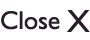
<style>
.page{position:relative;width:90px;height:40px;background:#ffffff}
.page>*{position:absolute;margin:0}
.t1{font:26px "GillSansStd";color:#271f25}
.t2{font:32px "GillSansStd";color:#271f25}
</style>
<div class="page">
<p class="t1" style="left:1px;top:11px;width:59px;height:19px">Close</p>
<p class="t2" style="left:67px;top:10px;width:23px;height:22px">X</p>
</div>
